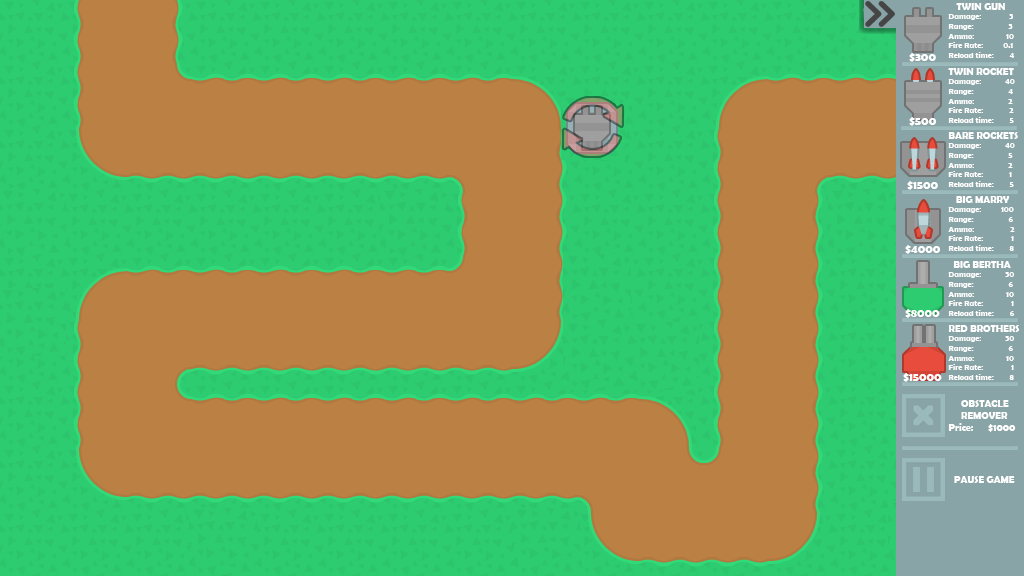
<style>
.page{position:relative;width:1024px;height:576px;background:#bb8044}
.page>*{position:absolute;margin:0}
.t1{font:8px "BerlinSansFBDemi-Bold";color:#ffffff}
.t2{font:10px "BerlinSansFBDemi-Bold";color:#ffffff}
.t3{font:12px "BerlinSansFBDemi-Bold";color:#ffffff}
</style>
<div class="page">
<p class="t1" style="left:948px;top:3px;width:67px;height:55px"><span class="t2">TWIN GUN<br></span>Damage:              3<br>Range:             3<br>Ammo:                10<br>Fire Rate:          0.1<br>Reload time:        4</p>
<p class="t3" style="left:909px;top:53px;width:27px;height:9px">$300</p>
<p class="t1" style="left:948px;top:68px;width:67px;height:55px"><span class="t2">TWIN ROCKET<br></span>Damage:            40<br>Range:             4<br>Ammo:                 2<br>Fire Rate:             2<br>Reload time:        5</p>
<p class="t3" style="left:909px;top:117px;width:28px;height:9px">$500</p>
<p class="t1" style="left:948px;top:132px;width:70px;height:55px"><span class="t2">BARE ROCKETS<br></span>Damage:            40<br>Range:             5<br>Ammo:                 2<br>Fire Rate:             1<br>Reload time:        5</p>
<p class="t3" style="left:907px;top:181px;width:31px;height:9px">$1500</p>
<p class="t1" style="left:948px;top:196px;width:67px;height:55px"><span class="t2">   BIG MARRY<br></span>Damage:          100<br>Range:             6<br>Ammo:                  2<br>Fire Rate:              1<br>Reload time:        8</p>
<p class="t3" style="left:905px;top:245px;width:36px;height:9px">$4000</p>
<p class="t1" style="left:948px;top:261px;width:67px;height:55px"><span class="t2">  BIG BERTHA<br></span>Damage:            30<br>Range:             6<br>Ammo:                10<br>Fire Rate:              1<br>Reload time:        6</p>
<p class="t3" style="left:905px;top:309px;width:35px;height:9px">$8000</p>
<p class="t1" style="left:948px;top:325px;width:72px;height:55px"><span class="t2">RED BROTHERS<br></span>Damage:            30<br>Range:             6<br>Ammo:                10<br>Fire Rate:              1<br>Reload time:        8</p>
<p class="t3" style="left:903px;top:373px;width:39px;height:9px">$15000</p>
<p class="t2" style="left:948px;top:400px;width:68px;height:32px">OBSTACLE<br>     REMOVER<br>Price:      $1000</p>
<p class="t2" style="left:954px;top:476px;width:61px;height:7px">PAUSE GAME</p>
</div>
